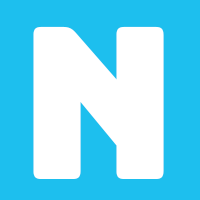
<style>
.page{position:relative;width:200px;height:200px;background:#1dbfee}
.page>*{position:absolute;margin:0}
.t1{font:211.1px "Bungee-Regular";color:#ffffff}
</style>
<div class="page">
<p class="t1" style="left:33px;top:26px;width:131px;height:153px">N</p>
</div>
